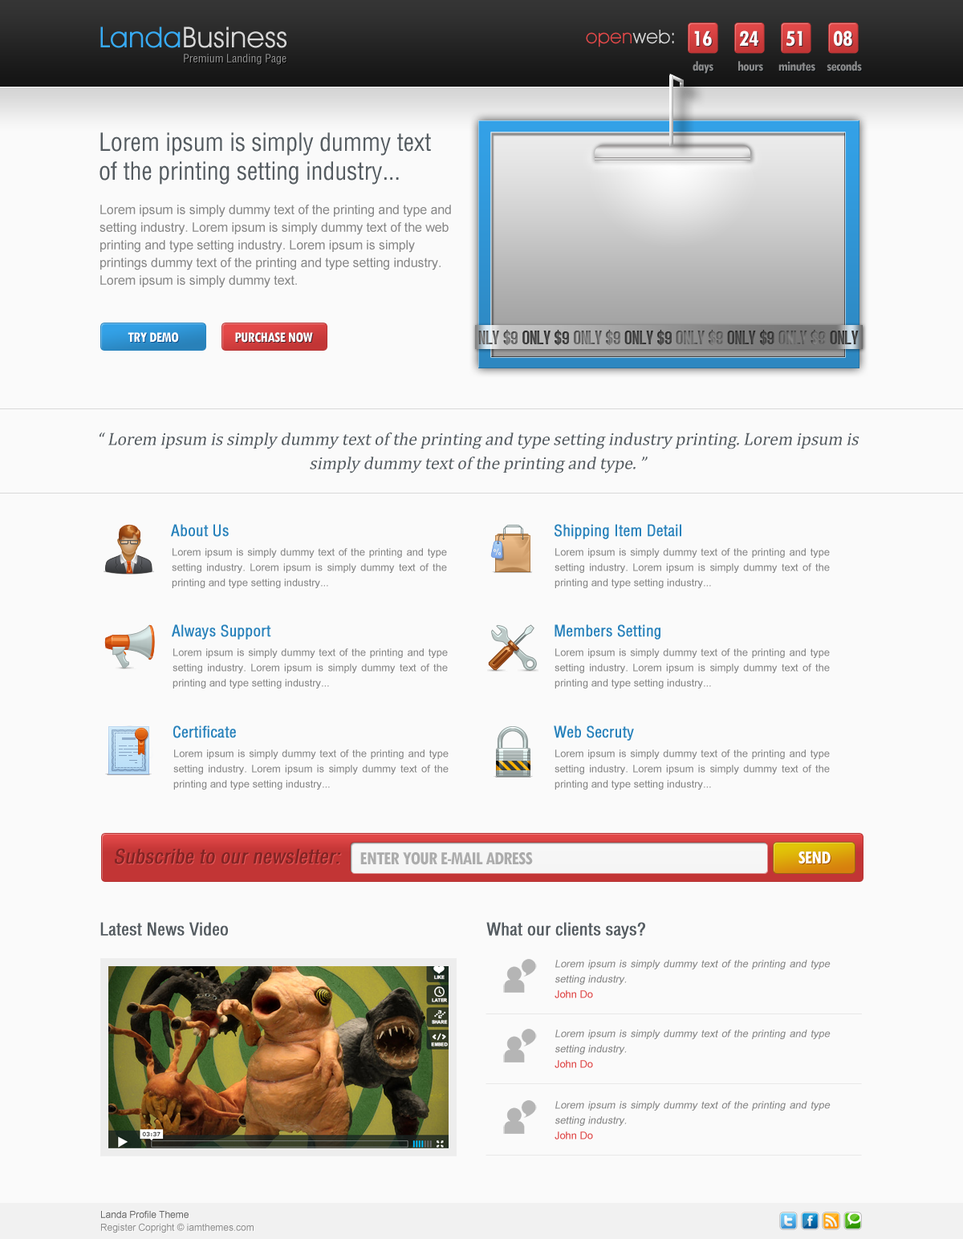
<style>
.page{position:relative;width:963px;height:1239px;background:#fafafa}
.page>*{position:absolute;margin:0}
.t1{font:28.9px "AvantGardeITCbyBT-Book";letter-spacing:0.01em;color:#d8d8d8}
.t2{font:28.9px "AvantGardeITCbyBT-Book";letter-spacing:0.01em;color:#37aaf3}
.t3{font:19.3px "AvantGardeITCbyBT-Book";letter-spacing:0.01em;color:#e24848}
.t4{font:19.3px "AvantGardeITCbyBT-Book";letter-spacing:0.01em;color:#d8d8d8}
.t5{font:24.1px "TwCenMT-CondensedBold";letter-spacing:-0.04em;color:#ffffff}
.t6{font:11.2px "ContextCondensedSSiCondensed";color:#8e8e8e}
.t7{font:14.4px "TwCenMT-CondensedBold";letter-spacing:-0.04em;color:#8a8a8a}
.t8{font:24.1px/28.9px "ContextCondensedSSiCondensed";letter-spacing:-0.005em;color:#555c61}
.t9{font:12.8px/17.6px "ArialMT";letter-spacing:-0.005em;color:#898989}
.t10{font:20.4px "AccidentalPresidency";letter-spacing:-0.01em;color:#575757}
.t11{font:20.4px "AccidentalPresidency";letter-spacing:-0.01em;color:#919191}
.t12{font:15.2px "TwCenMT-CondensedBold";letter-spacing:-0.04em;color:#ffffff}
.t13{font:17.6px/24.1px "CambriaMath";letter-spacing:-0.005em;color:#555c61;font-style:italic}
.t14{font:15.2px "ContextCondensedSSiCondensed";letter-spacing:-0.005em;color:#2982bb;font-weight:bold}
.t15{font:10.4px/15.2px "ArialMT";letter-spacing:-0.005em;color:#898989}
.t16{font:19.3px "ContextCondensedSSiCondensed";letter-spacing:-0.005em;color:#822424;font-weight:bold;font-style:italic}
.t17{font:19.3px "TwCenMT-CondensedBold";letter-spacing:-0.04em;color:#acacac}
.t18{font:19.3px "TwCenMT-CondensedBold";letter-spacing:-0.04em;color:#ffffff}
.t19{font:16.8px "ContextCondensedSSiCondensed";letter-spacing:-0.005em;color:#555c61;font-weight:bold}
.t20{font:10.4px/15.2px "ArialMT";letter-spacing:-0.005em;color:#898989;font-style:italic}
.t21{font:10.4px/15.2px "ArialMT";letter-spacing:-0.005em;color:#dd4545}
.t22{font:9.6px/12.8px "ArialMT";letter-spacing:-0.005em;color:#898989}
.t23{font:9.6px/12.8px "ArialMT";letter-spacing:-0.005em;color:#616161}
</style>
<div class="page">
<p class="t1" style="left:100px;top:26px;width:186px;height:22px"><span class="t2">Landa</span>Business</p>
<p class="t3" style="left:586px;top:30px;width:88px;height:17px">open<span class="t4">web:</span></p>
<p class="t5" style="left:694px;top:30px;width:18px;height:17px">16</p>
<p class="t5" style="left:740px;top:30px;width:18px;height:16px">24</p>
<p class="t5" style="left:785px;top:30px;width:17px;height:17px">51</p>
<p class="t5" style="left:834px;top:30px;width:18px;height:17px">08</p>
<p class="t6" style="left:184px;top:54px;width:102px;height:11px">Premium Landing Page</p>
<p class="t7" style="left:692px;top:61px;width:21px;height:13px">days</p>
<p class="t7" style="left:738px;top:61px;width:25px;height:10px">hours</p>
<p class="t7" style="left:778px;top:61px;width:37px;height:10px">minutes</p>
<p class="t7" style="left:826px;top:61px;width:36px;height:10px">seconds</p>
<p class="t8" style="left:99px;top:132px;width:332px;height:53px">Lorem ipsum is simply dummy text of the printing setting industry...</p>
<p class="t9" style="left:99px;top:205px;width:352px;height:83px">Lorem ipsum is simply dummy text of the printing and type and setting industry. Lorem ipsum is simply dummy text of the web printing and type setting industry. Lorem ipsum is simply printings dummy text of the printing and type setting industry. Lorem ipsum is simply dummy text.</p>
<p class="t10" style="left:478px;top:330px;width:380px;height:15px"><span class="t11">NLY $9 </span>ONLY $9 <span class="t11">ONLY $9 </span>ONLY $9 <span class="t11">ONLY $9 </span>ONLY $9 <span class="t11">ONLY $9 </span>ONLY</p>
<p class="t12" style="left:128px;top:332px;width:51px;height:11px">TRY DEMO</p>
<p class="t12" style="left:235px;top:332px;width:78px;height:11px">PURCHASE NOW</p>
<p class="t13" style="left:99px;top:432px;width:760px;height:41px;text-align:center">“ Lorem ipsum is simply dummy text of the printing and type setting industry printing. Lorem ipsum is simply dummy text of the printing and type. ”</p>
<p class="t14" style="left:171px;top:524px;width:58px;height:13px">About Us</p>
<p class="t14" style="left:554px;top:524px;width:127px;height:15px">Shipping Item Detail</p>
<p class="t15" style="left:172px;top:548px;width:275px;height:40px;text-align:justify">Lorem ipsum is simply dummy text of the printing and type setting industry. Lorem ipsum is simply dummy text of the printing and type setting industry...</p>
<p class="t15" style="left:554px;top:548px;width:276px;height:40px;text-align:justify">Lorem ipsum is simply dummy text of the printing and type setting industry. Lorem ipsum is simply dummy text of the printing and type setting industry...</p>
<p class="t14" style="left:172px;top:624px;width:99px;height:15px">Always Support</p>
<p class="t14" style="left:554px;top:624px;width:106px;height:15px">Members Setting</p>
<p class="t15" style="left:172px;top:648px;width:276px;height:40px;text-align:justify">Lorem ipsum is simply dummy text of the printing and type setting industry. Lorem ipsum is simply dummy text of the printing and type setting industry...</p>
<p class="t15" style="left:554px;top:648px;width:276px;height:40px;text-align:justify">Lorem ipsum is simply dummy text of the printing and type setting industry. Lorem ipsum is simply dummy text of the printing and type setting industry...</p>
<p class="t14" style="left:173px;top:725px;width:63px;height:13px">Certificate</p>
<p class="t14" style="left:554px;top:725px;width:80px;height:15px">Web Secruty</p>
<p class="t15" style="left:173px;top:749px;width:275px;height:40px;text-align:justify">Lorem ipsum is simply dummy text of the printing and type setting industry. Lorem ipsum is simply dummy text of the printing and type setting industry...</p>
<p class="t15" style="left:554px;top:749px;width:276px;height:40px;text-align:justify">Lorem ipsum is simply dummy text of the printing and type setting industry. Lorem ipsum is simply dummy text of the printing and type setting industry...</p>
<p class="t16" style="left:115px;top:848px;width:226px;height:16px">Subscribe to our newsletter:</p>
<p class="t17" style="left:360px;top:852px;width:173px;height:13px">ENTER YOUR E-MAIL ADRESS</p>
<p class="t18" style="left:798px;top:851px;width:32px;height:13px">SEND</p>
<p class="t19" style="left:100px;top:922px;width:128px;height:13px">Latest News Video</p>
<p class="t19" style="left:486px;top:922px;width:159px;height:17px">What our clients says?</p>
<p class="t20" style="left:554px;top:959px;width:276px;height:39px;text-align:justify">Lorem ipsum is simply dummy text of the printing and type setting industry. <br><span class="t21">John Do</span></p>
<p class="t20" style="left:554px;top:1029px;width:276px;height:39px;text-align:justify">Lorem ipsum is simply dummy text of the printing and type setting industry. <br><span class="t21">John Do</span></p>
<p class="t20" style="left:554px;top:1101px;width:276px;height:38px;text-align:justify">Lorem ipsum is simply dummy text of the printing and type setting industry. <br><span class="t21">John Do</span></p>
<p class="t22" style="left:101px;top:1211px;width:153px;height:22px;text-align:justify"><span class="t23">Landa Profile Theme<br></span>Register Copright © iamthemes.com</p>
</div>
